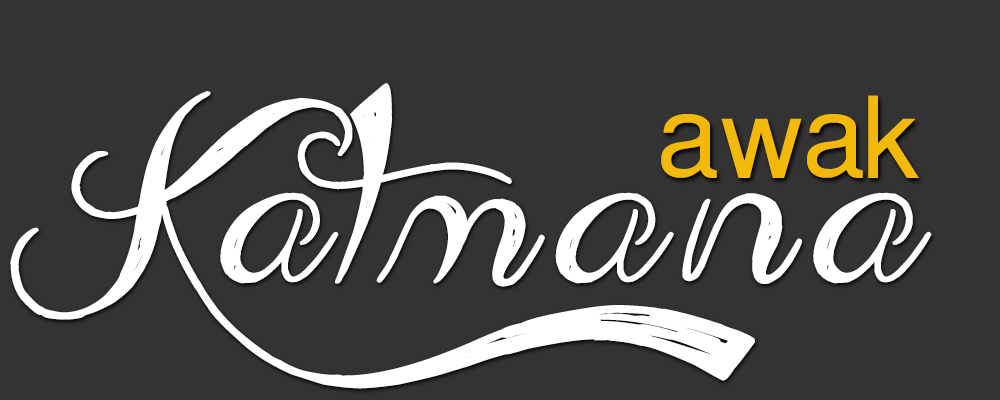
<style>
.page{position:relative;width:1000px;height:400px;background:#333333}
.page>*{position:absolute;margin:0}
.t1{font:177.5px "AdmirationPains";letter-spacing:0.1em;color:#ffffff;font-weight:bold}
.t2{font:115px "OpusChordsSans";letter-spacing:-0.002em;color:#f2b909}
</style>
<div class="page">
<p class="t1" style="left:10px;top:83px;width:922px;height:306px">Katmana</p>
<p class="t2" style="left:661px;top:95px;width:258px;height:83px">awak</p>
</div>
